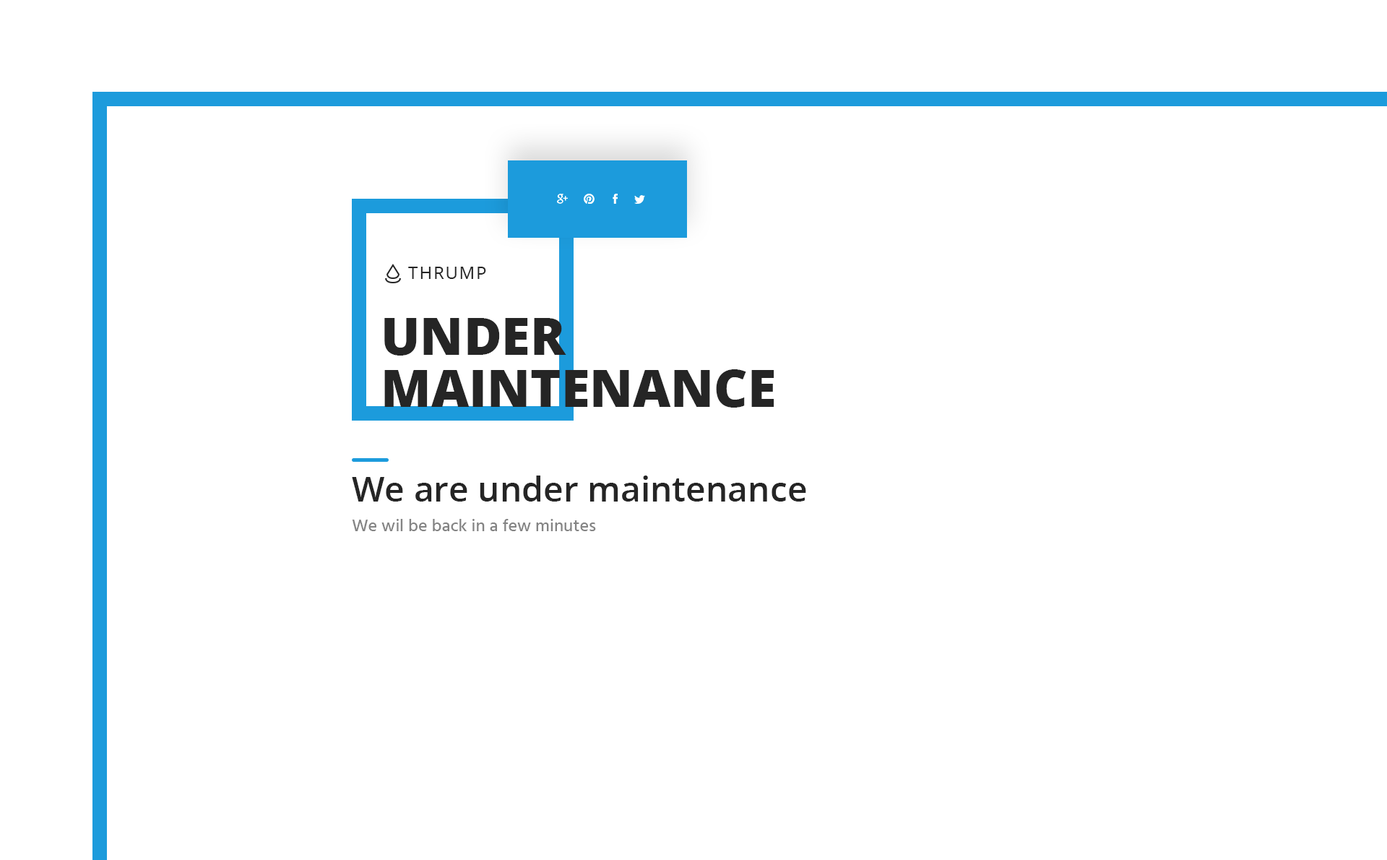
<style>
.page{position:relative;width:1387px;height:860px;background:#ffffff}
.page>*{position:absolute;margin:0}
.t1{font:17.3px "OpenSans";letter-spacing:0.075em;color:#252525;text-transform:uppercase}
.t2{font:52px/52px "OpenSans-Extrabold";color:#252525;text-transform:uppercase}
.t3{font:34.7px "OpenSans-Semibold";color:#252525}
.t4{font:17.3px "Hind-Medium";color:#848484}
</style>
<div class="page">
<p class="t1" style="left:408px;top:267px;width:78px;height:12px">Thrump</p>
<p class="t2" style="left:384px;top:318px;width:390px;height:89px">under<br>maintenance</p>
<p class="t3" style="left:352px;top:475px;width:454px;height:26px">We are under maintenance</p>
<p class="t4" style="left:352px;top:519px;width:244px;height:12px">We wil be back in a few minutes</p>
</div>
